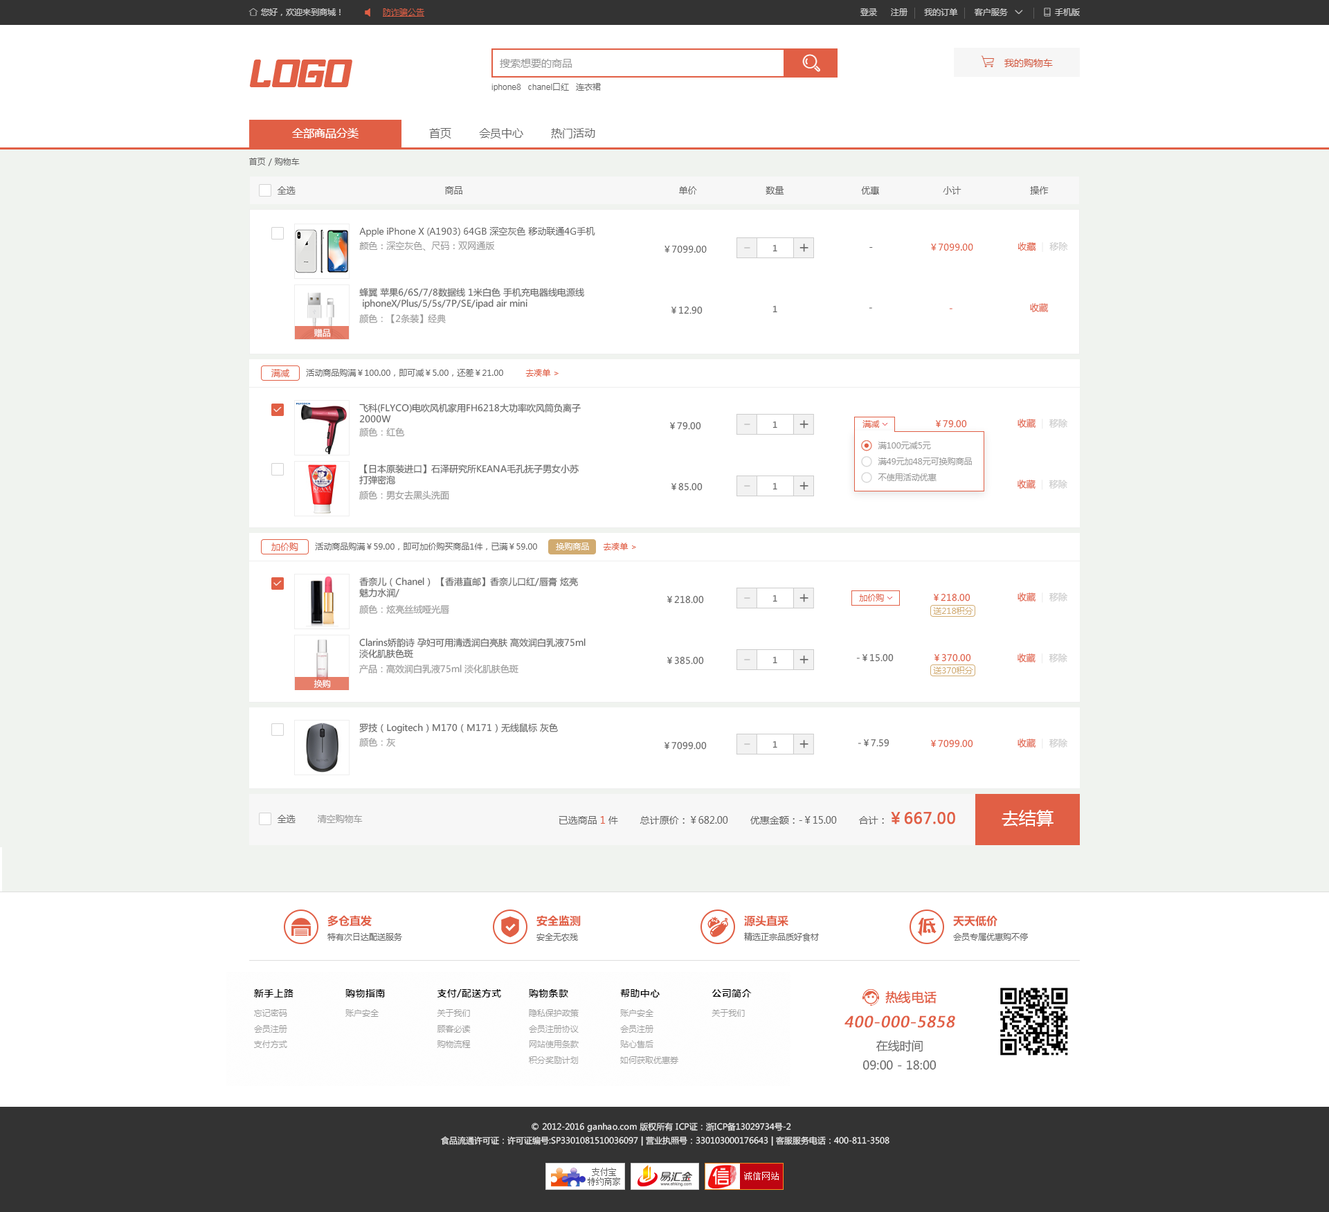
<style>
.page{position:relative;width:1329px;height:1212px;background:#ffffff}
.page>*{position:absolute;margin:0}
.t1{font:8.3px "MicrosoftYaHei";color:#666666}
.t2{font:9px "MicrosoftYaHei";color:#666666}
.t3{font:9px "MicrosoftYaHei";color:#999999}
.t4{font:15.7px "MicrosoftYaHei";color:#666666}
.t5{font:9px "MicrosoftYaHei";color:#e15f45}
.t6{font:9px "MicrosoftYaHei";color:#eeeeee}
.t7{font:9px "MicrosoftYaHei";color:#cccccc}
.t8{font:19.5px "MicrosoftYaHei";color:#cccccc}
.t9{font:9px "MicrosoftYaHei"}
.t10{font:8.3px "MicrosoftYaHei";color:#ffffff}
.t11{font:8.3px "MicrosoftYaHei";color:#e15f45}
.t12{font:8.3px "MicrosoftYaHei";color:#999999}
.t13{font:8.3px "MicrosoftYaHei";color:#fffefe}
.t14{font:8.3px "MicrosoftYaHei";color:#d1ab70}
.t15{font:9.7px "MicrosoftYaHei";color:#666666}
.t16{font:9.7px "MicrosoftYaHei";color:#e15f45}
.t17{font:15.2px "MicrosoftYaHei";color:#e15f45;font-weight:bold}
.t18{font:17.3px "MicrosoftYaHei";color:#ffffff}
.t19{font:11.1px "MicrosoftYaHei-Bold";color:#e15f45}
.t20{font:12.5px "MicrosoftYaHei";color:#e15f45;font-weight:bold}
.t21{font:14.9px "MicrosoftYaHei";color:#e15f45;font-weight:bold;font-style:italic}
.t22{font:11.8px/19.3px "MicrosoftYaHei";color:#666666}
.t23{font:8.3px/13.8px "MicrosoftYaHei";color:#eeeeee}
</style>
<div class="page">
<p class="t1" style="left:249px;top:158px;width:51px;height:8px">首页 / 购物车</p>
<p class="t2" style="left:278px;top:186px;width:771px;height:9px">全选                                                      商品                                                                              单价                         数量                            优惠                       小计                         操作</p>
<p class="t2" style="left:359px;top:227px;width:236px;height:10px">Apple iPhone X (A1903) 64GB 深空灰色 移动联通4G手机</p>
<p class="t3" style="left:359px;top:242px;width:135px;height:9px">颜色：深空灰色、尺码：双网通版</p>
<p class="t2" style="left:665px;top:246px;width:42px;height:7px">￥7099.00</p>
<p class="t1" style="left:773px;top:244px;width:4px;height:8px">1</p>
<p class="t4" style="left:800px;top:244px;width:9px;height:8px">+</p>
<p class="t5" style="left:931px;top:244px;width:42px;height:7px">￥7099.00</p>
<p class="t5" style="left:1018px;top:242px;width:50px;height:10px">收藏 <span class="t6"> |  </span><span class="t7">移除</span></p>
<p class="t8" style="left:744px;top:247px;width:6px;height:2px">-</p>
<p class="t2" style="left:870px;top:247px;width:3px;height:1px">-</p>
<p class="t2" style="left:359px;top:288px;width:225px;height:21px">蜂翼 苹果6/6S/7/8数据线 1米白色 手机充电器线电源线<br> iphoneX/Plus/5/5s/7P/SE/ipad air mini</p>
<p class="t1" style="left:773px;top:305px;width:4px;height:8px">1</p>
<p class="t5" style="left:1030px;top:303px;width:18px;height:9px">收藏</p>
<p class="t3" style="left:359px;top:314px;width:87px;height:9px">颜色：【2条装】经典</p>
<p class="t2" style="left:672px;top:306px;width:31px;height:8px">￥12.90</p>
<p class="t9" style="left:869px;top:307px;width:3px;height:2px">-</p>
<p class="t9" style="left:949px;top:308px;width:4px;height:1px">-</p>
<p class="t10" style="left:314px;top:329px;width:17px;height:8px">赠品</p>
<p class="t5" style="left:271px;top:369px;width:18px;height:8px">满减</p>
<p class="t1" style="left:306px;top:369px;width:197px;height:8px">活动商品购满￥100.00，即可减￥5.00，还差￥21.00</p>
<p class="t11" style="left:525px;top:369px;width:34px;height:8px">去凑单 &gt;</p>
<p class="t2" style="left:359px;top:404px;width:222px;height:19px">飞科(FLYCO)电吹风机家用FH6218大功率吹风筒负离子 <br>2000W</p>
<p class="t2" style="left:670px;top:422px;width:31px;height:8px">￥79.00</p>
<p class="t8" style="left:744px;top:424px;width:6px;height:1px">-</p>
<p class="t1" style="left:773px;top:421px;width:4px;height:8px">1</p>
<p class="t4" style="left:800px;top:420px;width:9px;height:9px">+</p>
<p class="t11" style="left:863px;top:420px;width:17px;height:8px">满减</p>
<p class="t9" style="left:869px;top:423px;width:3px;height:1px">-</p>
<p class="t5" style="left:936px;top:420px;width:31px;height:8px">￥79.00</p>
<p class="t5" style="left:1018px;top:419px;width:50px;height:10px">收藏 <span class="t6"> |  </span><span class="t7">移除</span></p>
<p class="t3" style="left:359px;top:428px;width:46px;height:9px">颜色：红色</p>
<p class="t12" style="left:878px;top:442px;width:53px;height:7px">满100元减5元</p>
<p class="t12" style="left:878px;top:458px;width:94px;height:7px">满49元加48元可换购商品</p>
<p class="t2" style="left:359px;top:465px;width:220px;height:20px">【日本原装进口】石泽研究所KEANA毛孔抚子男女小苏<br>打弹密泡</p>
<p class="t12" style="left:878px;top:474px;width:59px;height:7px">不使用活动优惠</p>
<p class="t2" style="left:672px;top:483px;width:31px;height:8px">￥85.00</p>
<p class="t8" style="left:744px;top:485px;width:6px;height:2px">-</p>
<p class="t1" style="left:773px;top:483px;width:4px;height:7px">1</p>
<p class="t4" style="left:800px;top:482px;width:9px;height:8px">+</p>
<p class="t5" style="left:1018px;top:480px;width:50px;height:10px">收藏 <span class="t6"> |  </span><span class="t7">移除</span></p>
<p class="t3" style="left:359px;top:490px;width:90px;height:10px">颜色：男女去黑头洗面</p>
<p class="t5" style="left:271px;top:543px;width:27px;height:8px">加价购</p>
<p class="t1" style="left:315px;top:543px;width:222px;height:7px">活动商品购满￥59.00，即可加价购买商品1件，已满￥59.00</p>
<p class="t13" style="left:556px;top:543px;width:33px;height:7px">换购商品</p>
<p class="t11" style="left:603px;top:543px;width:33px;height:7px">去凑单 &gt;</p>
<p class="t2" style="left:359px;top:577px;width:219px;height:20px">香奈儿（Chanel） 【香港直邮】香奈儿口红/唇膏 炫亮<br>魅力水润/</p>
<p class="t5" style="left:934px;top:593px;width:37px;height:9px">￥218.00</p>
<p class="t5" style="left:1018px;top:593px;width:50px;height:10px">收藏 <span class="t6"> |  </span><span class="t7">移除</span></p>
<p class="t3" style="left:359px;top:605px;width:90px;height:9px">颜色：炫亮丝绒哑光唇</p>
<p class="t2" style="left:667px;top:595px;width:37px;height:9px">￥218.00</p>
<p class="t8" style="left:744px;top:597px;width:6px;height:2px">-</p>
<p class="t1" style="left:773px;top:595px;width:4px;height:7px">1</p>
<p class="t4" style="left:800px;top:594px;width:9px;height:8px">+</p>
<p class="t11" style="left:859px;top:594px;width:25px;height:8px">加价购</p>
<p class="t9" style="left:869px;top:597px;width:3px;height:1px">-</p>
<p class="t14" style="left:933px;top:607px;width:40px;height:8px">送218积分</p>
<p class="t2" style="left:359px;top:638px;width:227px;height:20px">Clarins娇韵诗 孕妇可用清透润白亮肤 高效润白乳液75ml<br>淡化肌肤色斑</p>
<p class="t2" style="left:856px;top:654px;width:38px;height:8px">-￥15.00</p>
<p class="t5" style="left:935px;top:654px;width:36px;height:8px">￥370.00</p>
<p class="t5" style="left:1018px;top:654px;width:50px;height:10px">收藏 <span class="t6"> |  </span><span class="t7">移除</span></p>
<p class="t3" style="left:359px;top:665px;width:160px;height:9px">产品：高效润白乳液75ml 淡化肌肤色斑</p>
<p class="t2" style="left:667px;top:656px;width:37px;height:9px">￥385.00</p>
<p class="t8" style="left:744px;top:659px;width:6px;height:1px">-</p>
<p class="t1" style="left:773px;top:656px;width:4px;height:8px">1</p>
<p class="t4" style="left:800px;top:656px;width:9px;height:8px">+</p>
<p class="t14" style="left:933px;top:667px;width:40px;height:7px">送370积分</p>
<p class="t10" style="left:314px;top:679px;width:17px;height:9px">换购</p>
<p class="t2" style="left:359px;top:723px;width:199px;height:11px">罗技（Logitech）M170（M171）无线鼠标 灰色</p>
<p class="t3" style="left:359px;top:738px;width:36px;height:9px">颜色：灰</p>
<p class="t2" style="left:665px;top:741px;width:42px;height:9px">￥7099.00</p>
<p class="t8" style="left:744px;top:744px;width:6px;height:1px">-</p>
<p class="t1" style="left:773px;top:741px;width:4px;height:7px">1</p>
<p class="t4" style="left:800px;top:740px;width:9px;height:8px">+</p>
<p class="t2" style="left:858px;top:739px;width:32px;height:8px">-￥7.59</p>
<p class="t5" style="left:931px;top:739px;width:42px;height:9px">￥7099.00</p>
<p class="t5" style="left:1018px;top:739px;width:50px;height:10px">收藏 <span class="t6"> |  </span><span class="t7">移除</span></p>
<p class="t3" style="left:278px;top:815px;width:85px;height:8px"><span class="t2">全选        </span>清空购物车</p>
<p class="t15" style="left:559px;top:812px;width:396px;height:13px">已选商品 <span class="t16">1</span> 件        总计原价：￥682.00        优惠金额：-￥15.00        合计：<span class="t17">￥667.00</span></p>
<p class="t18" style="left:1002px;top:810px;width:52px;height:17px">去结算</p>
<p class="t19" style="left:327px;top:915px;width:45px;height:12px">多仓直发</p>
<p class="t19" style="left:537px;top:915px;width:44px;height:12px">安全监测</p>
<p class="t19" style="left:744px;top:915px;width:45px;height:12px">源头直采</p>
<p class="t19" style="left:953px;top:915px;width:45px;height:12px">天天低价</p>
<p class="t1" style="left:327px;top:933px;width:75px;height:8px">特有次日达配送服务</p>
<p class="t1" style="left:537px;top:933px;width:41px;height:9px">安全无农残</p>
<p class="t1" style="left:744px;top:933px;width:75px;height:9px">精选正宗品质好食材</p>
<p class="t1" style="left:953px;top:933px;width:75px;height:8px">会员专属优惠购不停</p>
<p class="t20" style="left:885px;top:991px;width:52px;height:13px">热线电话</p>
<p class="t21" style="left:845px;top:1016px;width:110px;height:12px">400-000-5858</p>
<p class="t22" style="left:863px;top:1040px;width:74px;height:30px;text-align:center">在线时间<br>09:00 - 18:00</p>
<p class="t23" style="left:441px;top:1122px;width:449px;height:24px;text-align:center">© 2012-2016 ganhao.com 版权所有 ICP证：浙ICP备13029734号-2   <br>食品流通许可证：许可证编号:SP3301081510036097 | 营业执照号：330103000176643 | 客服服务电话：400-811-3508</p>
</div>
